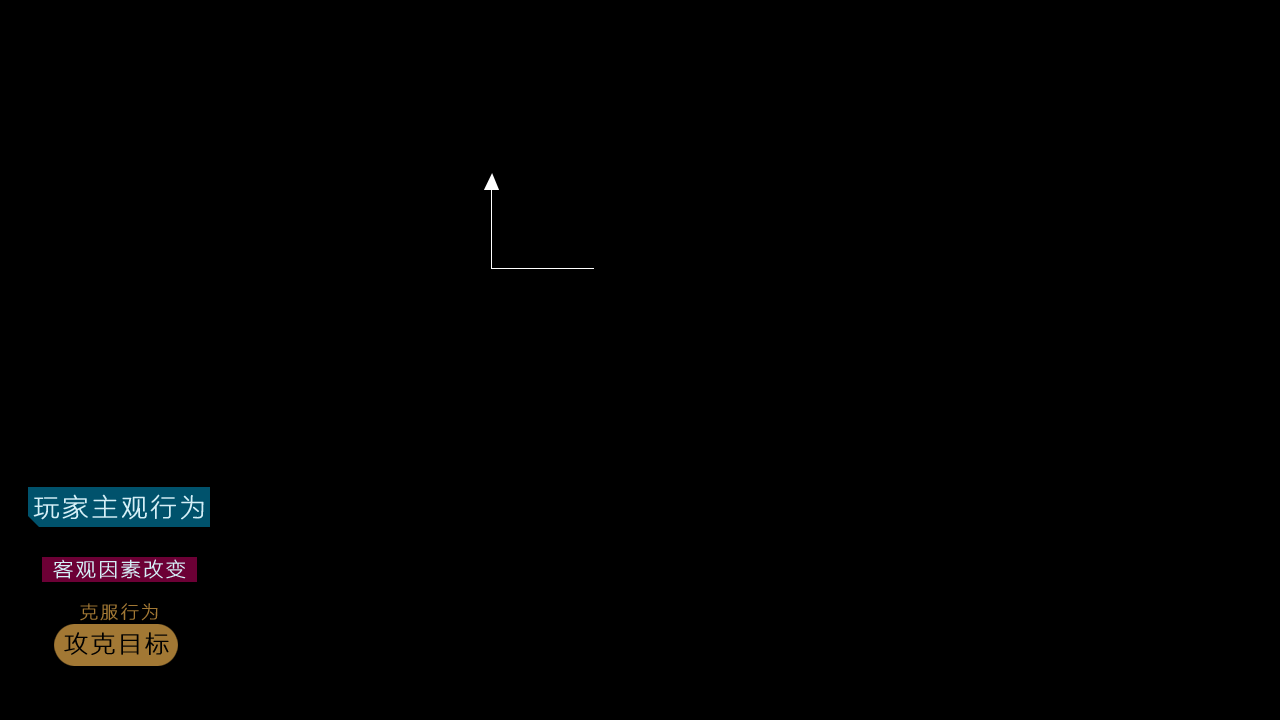
<style>
.page{position:relative;width:1280px;height:720px;background:#000000}
.page>*{position:absolute;margin:0}
.t1{font:26px "FZLTCXHJW--GB1-0";letter-spacing:0.1em;color:#d5eff7;font-weight:bold}
.t2{font:20px "FZLTCXHJW--GB1-0";letter-spacing:0.1em;color:#d5eff7;font-weight:bold}
.t3{font:18px "FZLTCXHJW--GB1-0";letter-spacing:0.1em;color:#a27834;font-weight:bold}
.t4{font:24px "FZLTCXHJW--GB1-0";letter-spacing:0.1em;color:#000000;font-weight:bold}
</style>
<div class="page">
<p class="t1" style="left:33px;top:494px;width:171px;height:26px">玩家主观行为</p>
<p class="t2" style="left:53px;top:559px;width:133px;height:20px">客观因素改变</p>
<p class="t3" style="left:80px;top:603px;width:78px;height:18px">克服行为</p>
<p class="t4" style="left:64px;top:632px;width:105px;height:23px">攻克目标</p>
</div>
